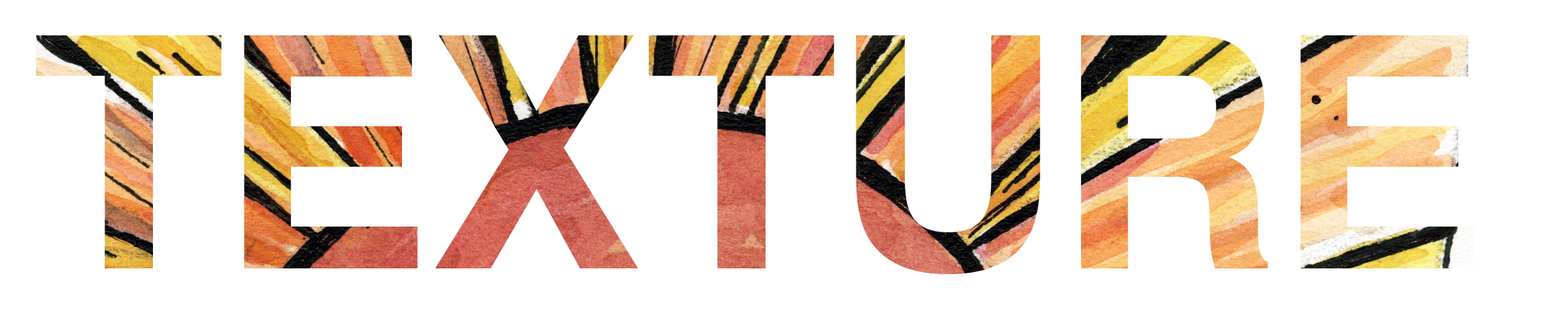
<style>
.page{position:relative;width:1568px;height:329px;background:#ffffff}
.page>*{position:absolute;margin:0}
.t1{font:324px "Helvetica-Bold"}
</style>
<div class="page">
<p class="t1" style="left:36px;top:35px;width:1438px;height:239px">TEXTURE</p>
</div>
